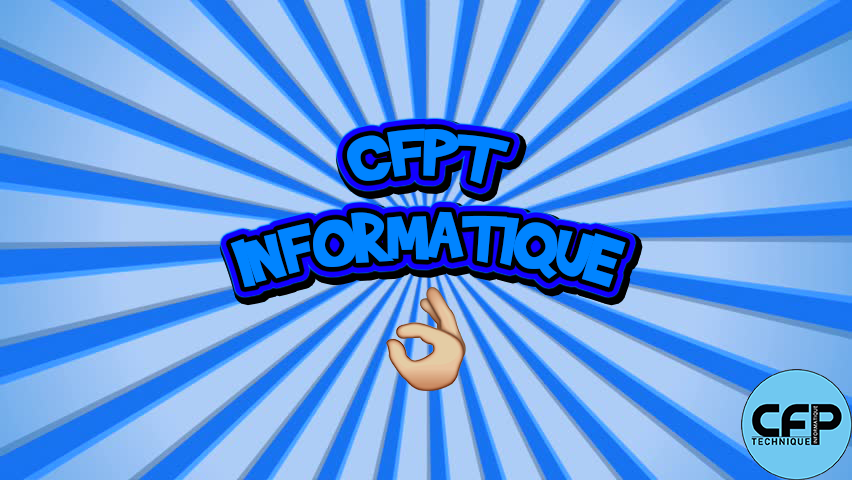
<style>
.page{position:relative;width:852px;height:480px}
.page>*{position:absolute;margin:0}
.t1{font:80px "BradyBunchRemastered";letter-spacing:-0.02em;color:#0084ff}
</style>
<div class="page">
<p class="t1" style="left:347px;top:128px;width:163px;height:56px">CFPT</p>
<p class="t1" style="left:230px;top:211px;width:396px;height:77px">INFORMATIQUE</p>
</div>
